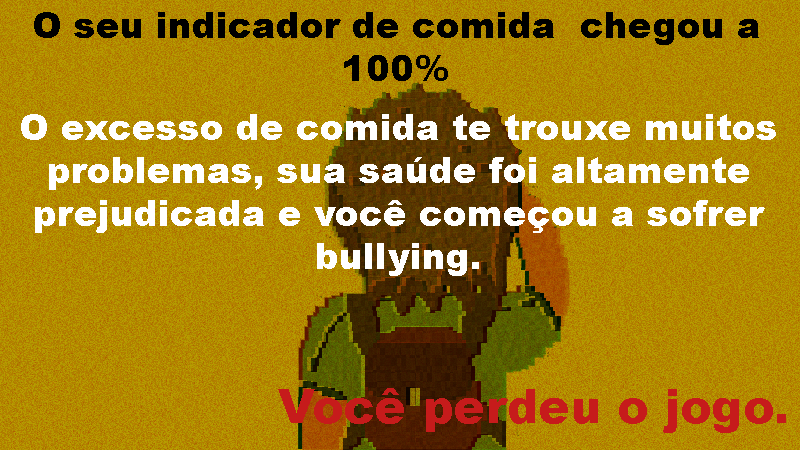
<style>
.page{position:relative;width:800px;height:450px}
.page>*{position:absolute;margin:0}
.t1{font:36px "Arial-Black";color:#000000}
.t2{font:36px "Arial-Black";color:#ffffff}
.t3{font:36px/80px "Arial-Black";color:#ffffff}
.t4{font:47.2px "Arial-Black";color:#c61b1b}
</style>
<div class="page">
<p class="t1" style="left:34px;top:12px;width:725px;height:69px;text-align:center">O seu indicador de comida  chegou a 100%</p>
<p class="t2" style="left:21px;top:114px;width:755px;height:162px;text-align:center"><span class="t3">O excesso de comida </span>te trouxe muitos problemas, sua saúde foi altamente prejudicada e você começou a sofrer bullying.</p>
<p class="t4" style="left:278px;top:388px;width:508px;height:45px">Você perdeu o jogo.</p>
</div>
